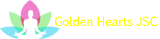
<style>
.page{position:relative;width:160px;height:39px;background:#ffffff}
.page>*{position:absolute;margin:0}
.t1{font:12px "EuphemiaCAS";color:#f9fc04}
</style>
<div class="page">
<p class="t1" style="left:55px;top:16px;width:103px;height:10px">Golden Hearts JSC</p>
</div>
